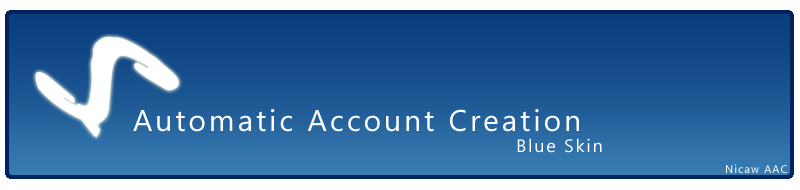
<style>
.page{position:relative;width:800px;height:190px}
.page>*{position:absolute;margin:0}
.t1{font:164.7px "Mistral";letter-spacing:0.1em;color:#ffffff;scale:1.52 1}
.t2{font:30px "SegoeUI";letter-spacing:0.1em;color:#ffffff}
.t3{font:18px "SegoeUI";letter-spacing:0.1em;color:#ffffff}
.t4{font:11px "SegoeUI";letter-spacing:0.1em;color:#ffffff}
</style>
<div class="page">
<p class="t1" style="left:35px;top:37px;width:144px;height:101px;rotate:57deg">S</p>
<p class="t2" style="left:133px;top:109px;width:446px;height:23px">Automatic Account Creation</p>
<p class="t3" style="left:517px;top:138px;width:85px;height:15px">Blue Skin</p>
<p class="t4" style="left:726px;top:164px;width:61px;height:9px">Nicaw AAC</p>
</div>
